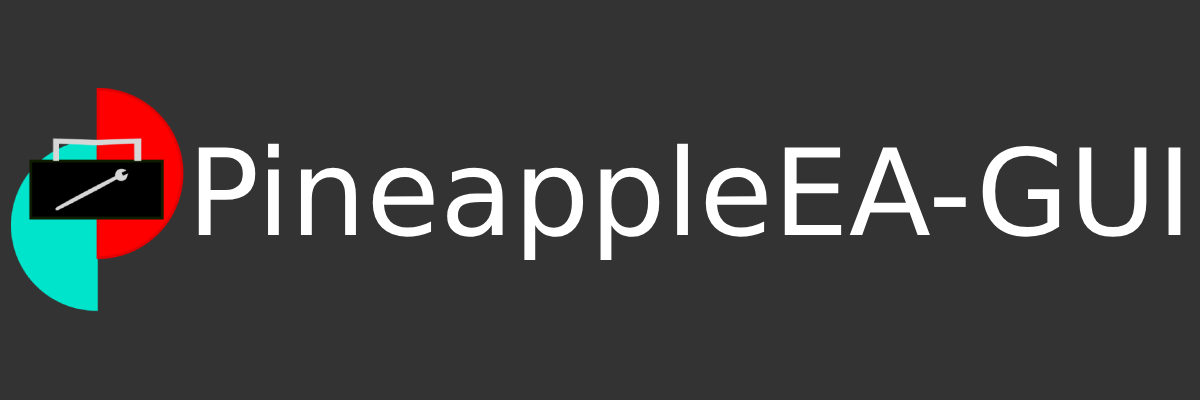
<style>
.page{position:relative;width:1200px;height:400px;background:#333333}
.page>*{position:absolute;margin:0}
.t1{font:120px "NintendoSwitchUI";color:#ffffff}
</style>
<div class="page">
<p class="t1" style="left:198px;top:143px;width:983px;height:117px">PineappleEA-GUI</p>
</div>
